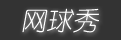
<style>
.page{position:relative;width:121px;height:40px;background:#333333}
.page>*{position:absolute;margin:0}
.t1{font:25.8px "YouYuan";color:#ffffff;font-style:italic}
</style>
<div class="page">
<p class="t1" style="left:22px;top:8px;width:77px;height:25px">网球秀</p>
</div>
